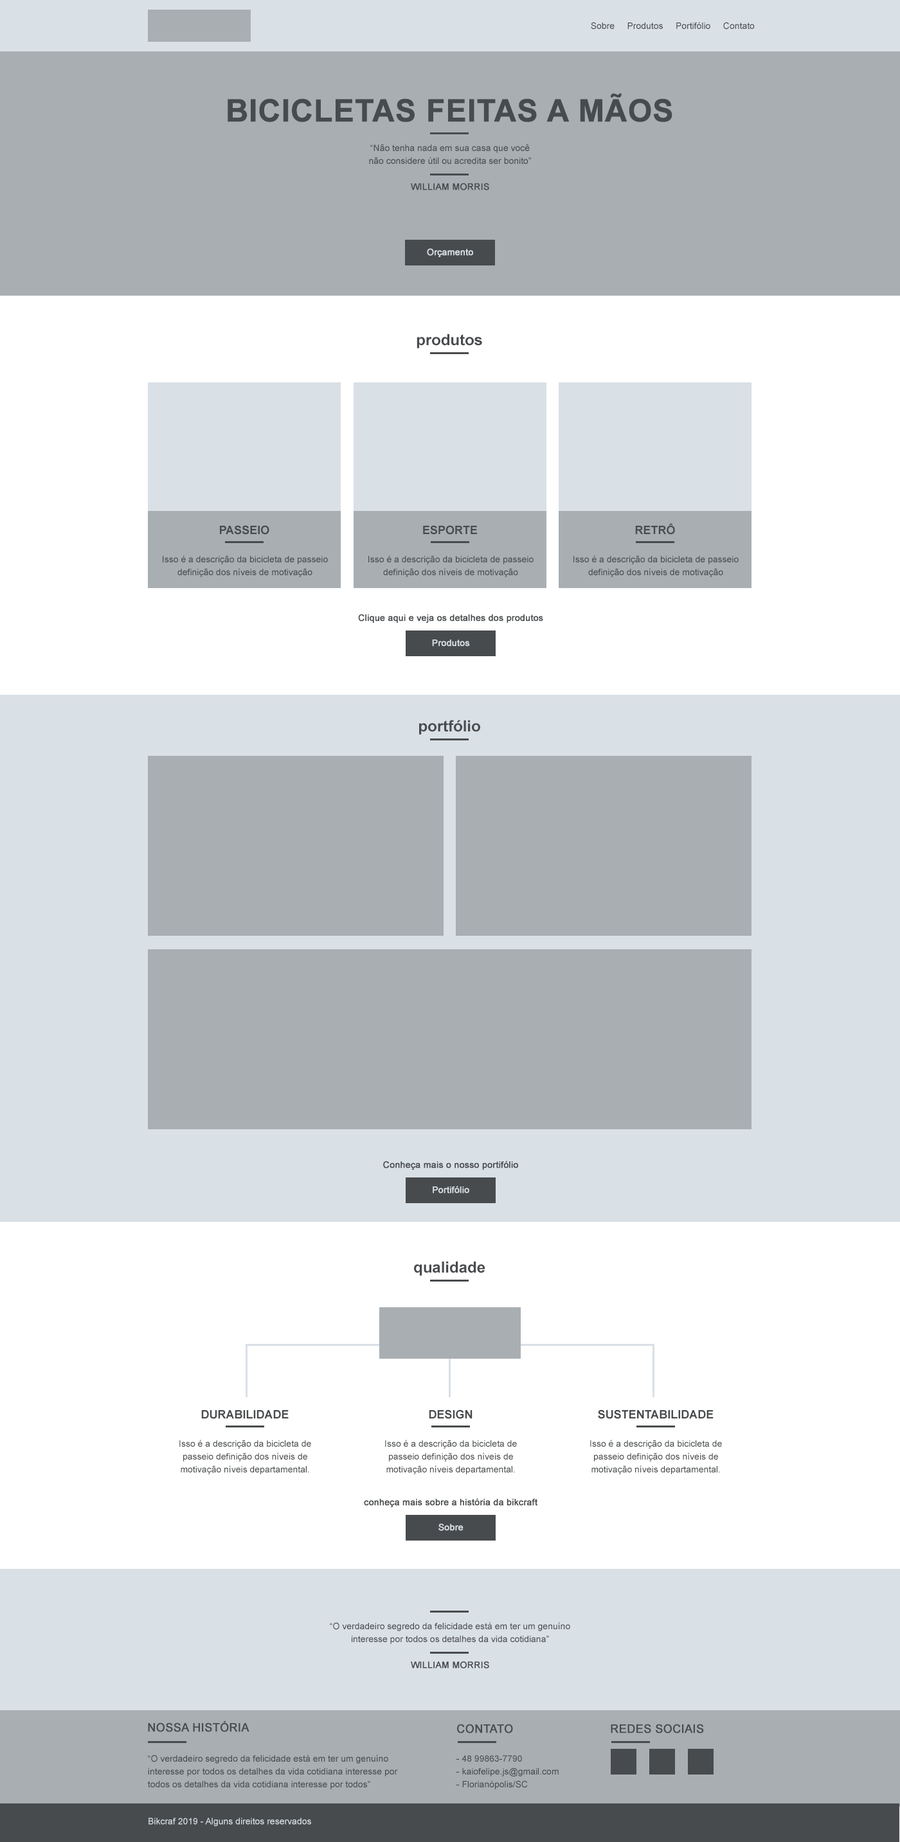
<style>
.page{position:relative;width:900px;height:1842px;background:#ffffff}
.page>*{position:absolute;margin:0}
.t1{font:9px "ArialMT";color:#484b4d}
.t2{font:30.9px "Arial-BoldMT";color:#484b4d;text-transform:uppercase;font-weight:bold}
.t3{font:9px/12.9px "ArialMT";color:#484b4d}
.t4{font:9px "ArialMT";color:#484b4d;text-transform:uppercase;font-weight:bold}
.t5{font:9px "ArialMT";color:#d9e0e6;font-weight:bold}
.t6{font:15.4px "Arial-BoldMT";color:#484b4d}
.t7{font:11.6px "Arial-BoldMT";color:#484b4d}
.t8{font:9px "ArialMT";color:#484b4d;font-weight:bold}
.t9{font:11.6px "ArialMT";color:#484b4d;text-transform:uppercase;font-weight:bold}
.t10{font:9px "ArialMT";color:#d9e0e6}
</style>
<div class="page">
<p class="t1" style="left:591px;top:22px;width:164px;height:8px">Sobre     Produtos     Portifólio     Contato</p>
<p class="t2" style="left:228px;top:93px;width:444px;height:29px">Bicicletas Feitas a Mãos</p>
<p class="t3" style="left:369px;top:144px;width:162px;height:20px;text-align:center">“Não tenha nada em sua casa que você<br>não considere útil ou acredita ser bonito”</p>
<p class="t4" style="left:411px;top:183px;width:78px;height:7px">William morris</p>
<p class="t5" style="left:427px;top:248px;width:46px;height:9px">Orçamento</p>
<p class="t6" style="left:417px;top:334px;width:65px;height:14px">produtos</p>
<p class="t7" style="left:220px;top:525px;width:49px;height:10px">PASSEIO</p>
<p class="t7" style="left:423px;top:525px;width:54px;height:10px">ESPORTE</p>
<p class="t7" style="left:635px;top:523px;width:40px;height:12px">RETRÔ</p>
<p class="t3" style="left:163px;top:555px;width:165px;height:22px;text-align:center">Isso é a descrição da bicicleta de passeio definição dos níveis de motivação departamental.vvv</p>
<p class="t3" style="left:368px;top:555px;width:166px;height:22px;text-align:center">Isso é a descrição da bicicleta de passeio definição dos níveis de motivação departamental.vvv</p>
<p class="t3" style="left:573px;top:555px;width:166px;height:22px;text-align:center">Isso é a descrição da bicicleta de passeio definição dos níveis de motivação departamental.vvv</p>
<p class="t8" style="left:358px;top:614px;width:185px;height:9px">Clique aqui e veja os detalhes dos produtos</p>
<p class="t5" style="left:432px;top:640px;width:38px;height:7px">Produtos</p>
<p class="t6" style="left:419px;top:720px;width:61px;height:15px">portfólio</p>
<p class="t8" style="left:383px;top:1161px;width:135px;height:9px">Conheça mais o nosso portifólio</p>
<p class="t5" style="left:433px;top:1186px;width:36px;height:8px">Portifólio</p>
<p class="t6" style="left:414px;top:1261px;width:71px;height:15px">qualidade</p>
<p class="t7" style="left:429px;top:1410px;width:44px;height:9px">DESIGN</p>
<p class="t7" style="left:598px;top:1410px;width:116px;height:9px">SUSTENTABILIDADE</p>
<p class="t7" style="left:201px;top:1410px;width:88px;height:9px">DURABILIDADE</p>
<p class="t3" style="left:179px;top:1440px;width:132px;height:35px;text-align:center">Isso é a descrição da bicicleta de passeio definição dos níveis de motivação níveis departamental.</p>
<p class="t3" style="left:385px;top:1440px;width:132px;height:35px;text-align:center">Isso é a descrição da bicicleta de passeio definição dos níveis de motivação níveis departamental.</p>
<p class="t3" style="left:590px;top:1440px;width:132px;height:35px;text-align:center">Isso é a descrição da bicicleta de passeio definição dos níveis de motivação níveis departamental.</p>
<p class="t8" style="left:364px;top:1498px;width:174px;height:10px">conheça mais sobre a história da bikcraft</p>
<p class="t5" style="left:438px;top:1524px;width:26px;height:7px">Sobre</p>
<p class="t3" style="left:330px;top:1623px;width:240px;height:21px;text-align:center">“O verdadeiro segredo da felicidade está em ter um genuíno<br>interesse por todos os detalhes da vida cotidiana”</p>
<p class="t4" style="left:411px;top:1662px;width:78px;height:7px">William morris</p>
<p class="t9" style="left:148px;top:1721px;width:101px;height:12px">Nossa História</p>
<p class="t9" style="left:457px;top:1724px;width:56px;height:10px">CONTATO</p>
<p class="t9" style="left:611px;top:1724px;width:93px;height:10px">REDES SOCIAIS</p>
<p class="t3" style="left:148px;top:1755px;width:250px;height:35px">“O verdadeiro segredo da felicidade está em ter um genuíno interesse por todos os detalhes da vida cotidiana interesse por todos os detalhes da vida cotidiana interesse por todos”</p>
<p class="t3" style="left:456px;top:1756px;width:103px;height:34px">- 48 99863-7790<br>- kaiofelipe.js@gmail.com<br>- Florianópolis/SC</p>
<p class="t10" style="left:148px;top:1818px;width:163px;height:9px">Bikcraf 2019 - Alguns direitos reservados</p>
</div>
